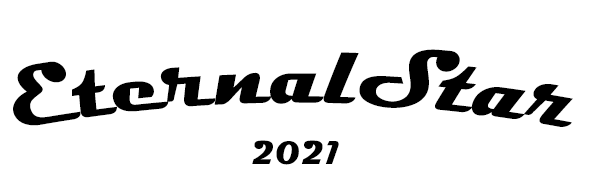
<style>
.page{position:relative;width:591px;height:177px;background:#ffffff}
.page>*{position:absolute;margin:0}
.t1{font:83.3px "Magneto-Bold";color:#000000}
.t2{font:33.3px "Magneto-Bold";color:#000000}
</style>
<div class="page">
<p class="t1" style="left:13px;top:49px;width:560px;height:78px">EternalStar</p>
<p class="t2" style="left:252px;top:140px;width:87px;height:25px">2021</p>
</div>
